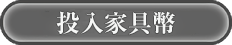
<style>
.page{position:relative;width:232px;height:45px}
.page>*{position:absolute;margin:0}
.t1{font:24px "RyuminPr6N-ExBold";color:#f6f7f6}
</style>
<div class="page">
<p class="t1" style="left:56px;top:11px;width:119px;height:24px">投入家具幣</p>
</div>
